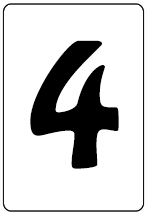
<style>
.page{position:relative;width:147px;height:213px;background:#ffffff}
.page>*{position:absolute;margin:0}
.t1{font:154.6px "HoboStd";color:#000000;scale:1.05 1}
</style>
<div class="page">
<p class="t1" style="left:30px;top:40px;width:89px;height:129px">4</p>
</div>
